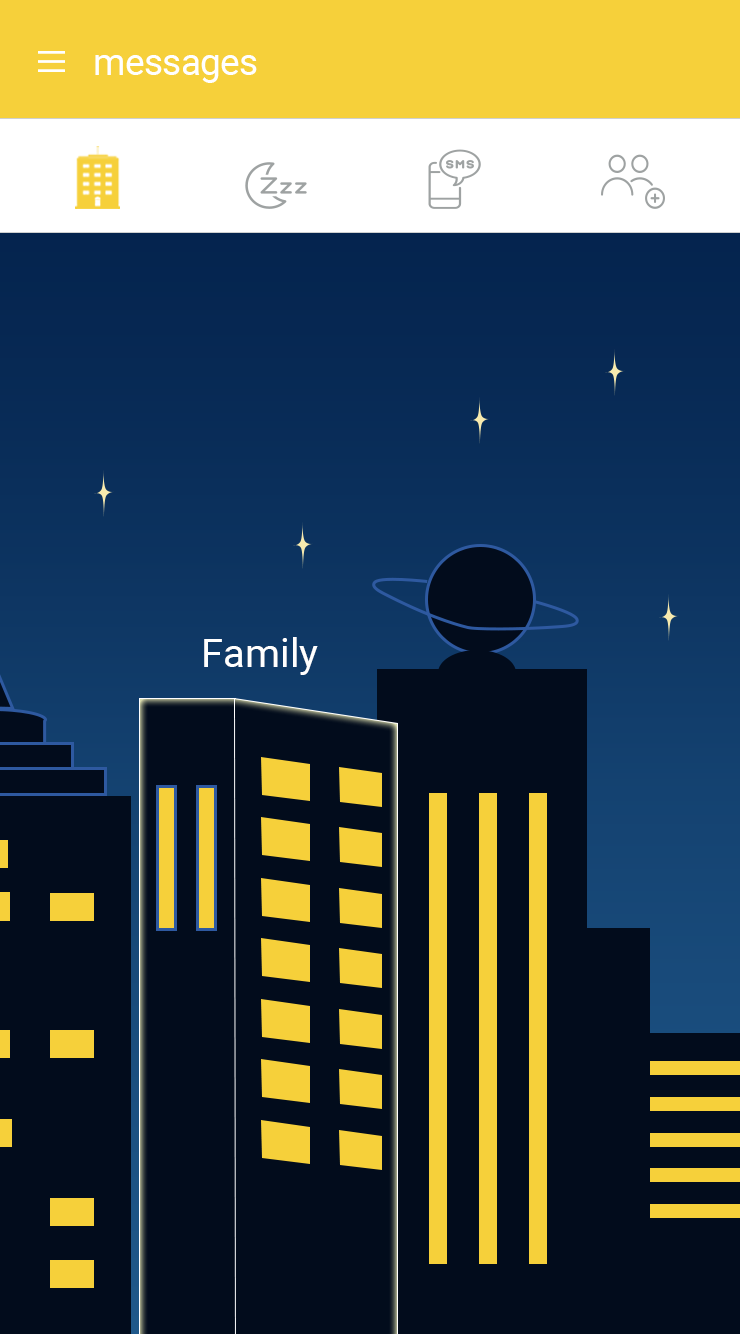
<style>
.page{position:relative;width:740px;height:1334px;background:#020c1c}
.page>*{position:absolute;margin:0}
.t1{font:37px "Roboto-Regular";letter-spacing:-0.02em;color:#ffffff}
.t2{font:40px "Roboto-Regular";color:#ffffff}
</style>
<div class="page">
<p class="t1" style="left:95px;top:55px;width:162px;height:28px">messages</p>
<p class="t2" style="left:204px;top:637px;width:114px;height:38px">Family</p>
</div>
